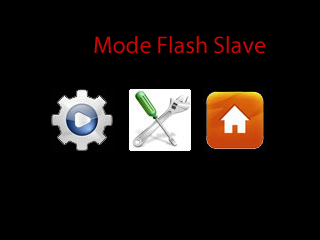
<style>
.page{position:relative;width:320px;height:240px;background:#000000}
.page>*{position:absolute;margin:0}
.t1{font:24px "MyriadPro-Regular";color:#ca0606}
</style>
<div class="page">
<p class="t1" style="left:94px;top:36px;width:172px;height:18px">Mode Flash Slave</p>
</div>
